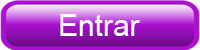
<style>
.page{position:relative;width:200px;height:50px}
.page>*{position:absolute;margin:0}
.t1{font:30px "ArialMT";color:#fefefe}
</style>
<div class="page">
<p class="t1" style="left:60px;top:14px;width:80px;height:22px">Entrar</p>
</div>
